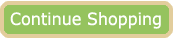
<style>
.page{position:relative;width:174px;height:39px;background:#95c35e}
.page>*{position:absolute;margin:0}
.t1{font:17px "Verdana";color:#ffffff;scale:0.94 1}
</style>
<div class="page">
<p class="t1" style="left:10px;top:12px;width:151px;height:17px">Continue Shopping</p>
</div>
